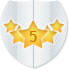
<style>
.page{position:relative;width:69px;height:71px}
.page>*{position:absolute;margin:0}
.t1{font:16px "TrebuchetMS";color:#d87000}
</style>
<div class="page">
<p class="t1" style="left:30px;top:31px;width:7px;height:11px">5</p>
</div>
